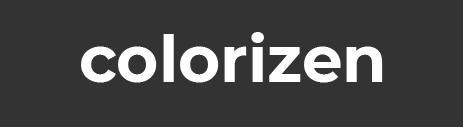
<style>
.page{position:relative;width:463px;height:127px;background:#333333}
.page>*{position:absolute;margin:0}
.t1{font:64.5px "Montserrat-Bold";color:#ffffff}
</style>
<div class="page">
<p class="t1" style="left:81px;top:32px;width:302px;height:51px">colorizen</p>
</div>
